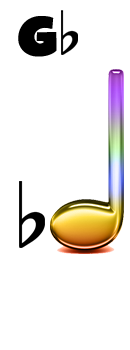
<style>
.page{position:relative;width:130px;height:350px;background:#ffffff}
.page>*{position:absolute;margin:0}
.t1{font:54px "LuckiestGuy-Regular";letter-spacing:0.005em;color:#000000;font-weight:bold;scale:1.11 1}
</style>
<div class="page">
<p class="t1" style="left:18px;top:16px;width:39px;height:41px">G</p>
</div>
